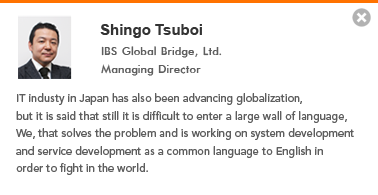
<style>
.page{position:relative;width:378px;height:195px;background:#ffffff}
.page>*{position:absolute;margin:0}
.t1{font:15px "Arial-BoldMT";color:#333333}
.t2{font:13px/17.5px "Futura-Normal";color:#5e5e5e}
.t3{font:11px/17.5px "AvenirLTStd-Medium";color:#5e5e5e}
</style>
<div class="page">
<p class="t1" style="left:100px;top:24px;width:102px;height:14px">Shingo Tsuboi</p>
<p class="t2" style="left:101px;top:46px;width:121px;height:30px">IBS Global Bridge, Ltd.<br>Managing Director</p>
<p class="t3" style="left:16px;top:93px;width:338px;height:82px">IT industy in Japan has also been advancing globalization,<br>but it is said that still it is difficult to enter a large wall of language,<br>We, that solves the problem and is working on system development<br>and service development as a common language to English in <br>order to fight in the world.</p>
</div>
